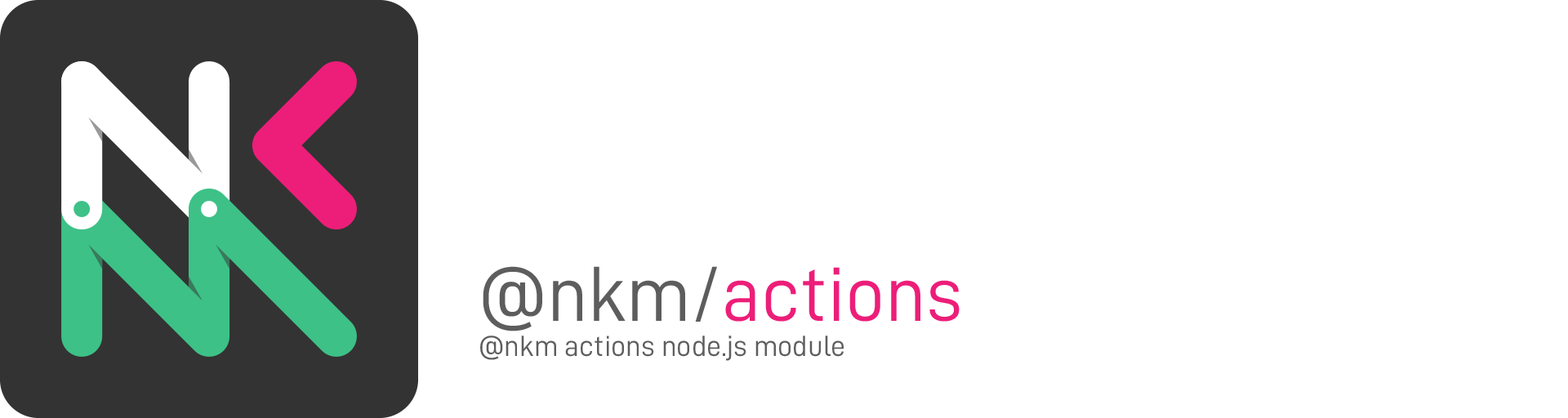
<style>
.page{position:relative;width:1568px;height:418px;background:#ffffff}
.page>*{position:absolute;margin:0}
.t1{font:29.4px "D-DIN";color:#5d5d5d}
.t2{font:78.4px "D-DIN";color:#5d5d5d}
.t3{font:78.4px "D-DIN";color:#ec1e79}
</style>
<div class="page">
<p class="t1" style="left:480px;top:266px;width:480px;height:95px"><span class="t2">@nkm/</span><span class="t3">actions<br></span>@nkm actions node.js module</p>
</div>
